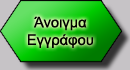
<style>
.page{position:relative;width:130px;height:70px}
.page>*{position:absolute;margin:0}
.t1{font:14.7px "ArialMT";color:#000000}
</style>
<div class="page">
<p class="t1" style="left:28px;top:16px;width:65px;height:32px;text-align:center">Άνοιγμα<br>Εγγράφου</p>
</div>
